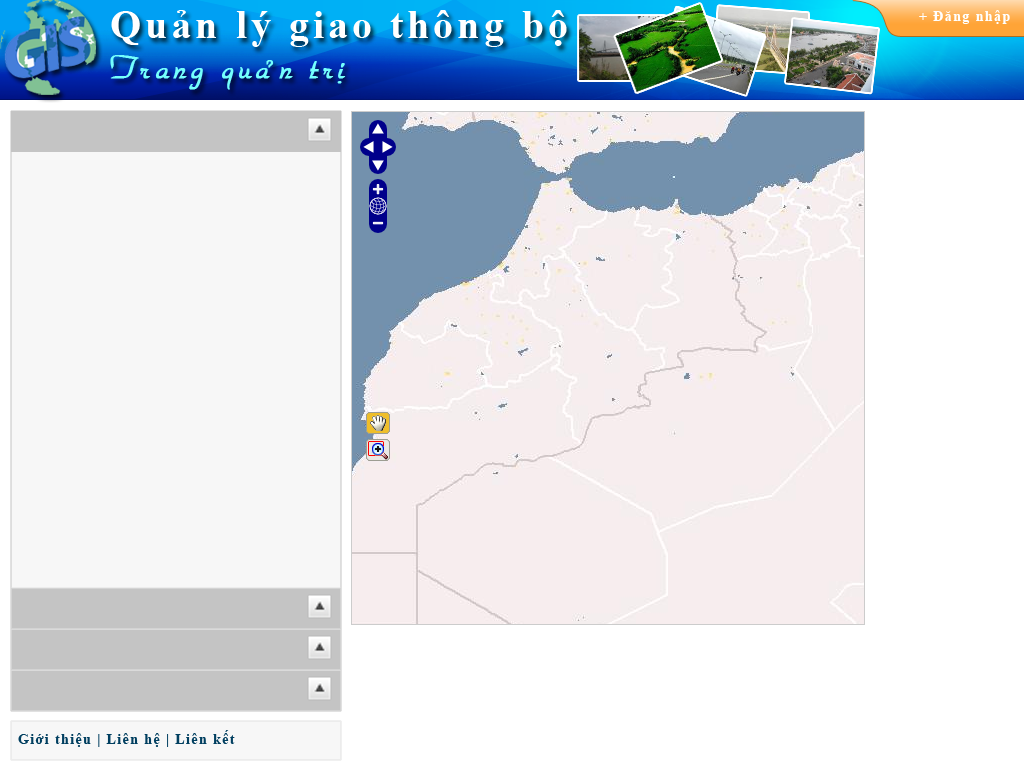
<style>
.page{position:relative;width:1024px;height:768px;background:#ffffff}
.page>*{position:absolute;margin:0}
.t1{font:40px "TimesNewRomanPS-BoldMT";letter-spacing:0.1em;color:#ffffff}
.t2{font:14px "TimesNewRomanPS-BoldMT";letter-spacing:0.1em;color:#ffffff}
.t3{font:34px "VNI-Park";letter-spacing:0.1em;color:#74fffd;font-weight:bold}
.t4{font:14px "TimesNewRomanPS-BoldMT";letter-spacing:0.1em;color:#013f60}
</style>
<div class="page">
<p class="t1" style="left:111px;top:10px;width:456px;height:37px">Quản lý giao thông bộ</p>
<p class="t2" style="left:919px;top:10px;width:91px;height:14px">+ Đăng nhập</p>
<p class="t3" style="left:110px;top:55px;width:236px;height:35px">Trang quaûn trò</p>
<p class="t4" style="left:18px;top:730px;width:217px;height:17px">Giới thiệu | Liên hệ | Liên kết</p>
</div>
